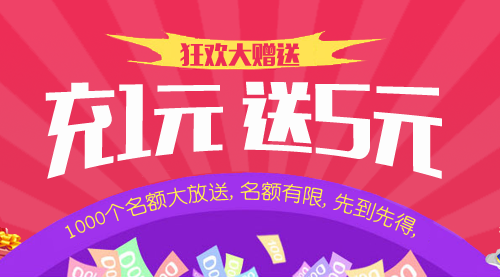
<style>
.page{position:relative;width:500px;height:277px}
.page>*{position:absolute;margin:0}
.t1{font:24px "MFLiHei_Noncommercial-Regular";color:#ed2d56}
.t2{font:101.6px "MFLiHei_Noncommercial-Regular";color:#fdfdfd;scale:0.71 1}
.t3{font:20px/14px "YouYuan";color:#ffef4b}
</style>
<div class="page">
<p class="t1" style="left:180px;top:43px;width:120px;height:23px">狂欢大赠送</p>
<p class="t2" style="left:45px;top:81px;width:397px;height:98px">充1元 送5元</p>
<p class="t3" style="left:65px;top:181px;width:351px;height:58px">1000个名额大放送,名额有限,先到先得,</p>
</div>
